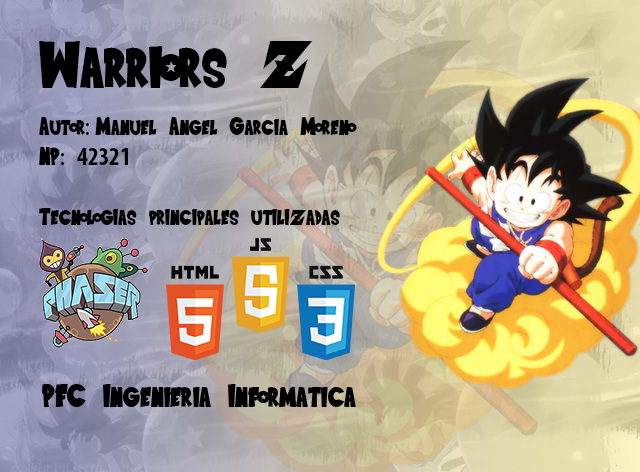
<style>
.page{position:relative;width:640px;height:472px}
.page>*{position:absolute;margin:0}
.t1{font:66.7px "SaiyanSans";color:#000000}
.t2{font:25px "SaiyanSans";color:#000000}
.t3{font:25px "MyriadPro-Regular";color:#000000}
.t4{font:25px "MyriadPro-BoldCond";color:#000000}
</style>
<div class="page">
<p class="t1" style="left:39px;top:41px;width:274px;height:47px">Warriors Z</p>
<p class="t2" style="left:39px;top:117px;width:318px;height:108px">Autor<span class="t3">: </span>Manuel Angel Garcia Moreno<br>NP<span class="t3">: </span><span class="t4">42321<br><br></span>Tecnologias principales utilizadas</p>
</div>
